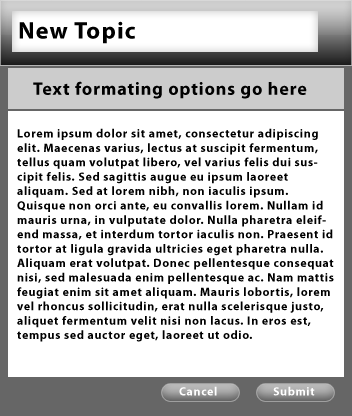
<style>
.page{position:relative;width:352px;height:416px;background:#ffffff}
.page>*{position:absolute;margin:0}
.t1{font:24px "MyriadPro-Bold";letter-spacing:0.05em;color:#000000}
.t2{font:18px "MyriadPro-Bold";letter-spacing:0.05em;color:#000000}
.t3{font:12px "MyriadPro-Bold";letter-spacing:0.05em;color:#000000}
.t4{font:12px "MyriadPro-Bold";letter-spacing:0.05em;color:#ffffff}
</style>
<div class="page">
<p class="t1" style="left:19px;top:21px;width:116px;height:23px">New Topic</p>
<p class="t2" style="left:33px;top:81px;width:274px;height:18px">Text formating options go here</p>
<p class="t3" style="left:17px;top:128px;width:317px;height:214px">Lorem ipsum dolor sit amet, consectetur adipiscing elit. Maecenas varius, lectus at suscipit fermentum, tellus quam volutpat libero, vel varius felis dui suscipit felis. Sed sagittis augue eu ipsum laoreet aliquam. Sed at lorem nibh, non iaculis ipsum. Quisque non orci ante, eu convallis lorem. Nullam id mauris urna, in vulputate dolor. Nulla pharetra eleifend massa, et interdum tortor iaculis non. Praesent id tortor at ligula gravida ultricies eget pharetra nulla. Aliquam erat volutpat. Donec pellentesque consequat nisi, sed malesuada enim pellentesque ac. Nam mattis feugiat enim sit amet aliquam. Mauris lobortis, lorem vel rhoncus sollicitudin, erat nulla scelerisque justo, aliquet fermentum velit nisi non lacus. In eros est, tempus sed auctor eget, laoreet ut odio.</p>
<p class="t4" style="left:179px;top:386px;width:38px;height:10px">Cancel</p>
<p class="t4" style="left:273px;top:386px;width:42px;height:10px">Submit</p>
</div>
